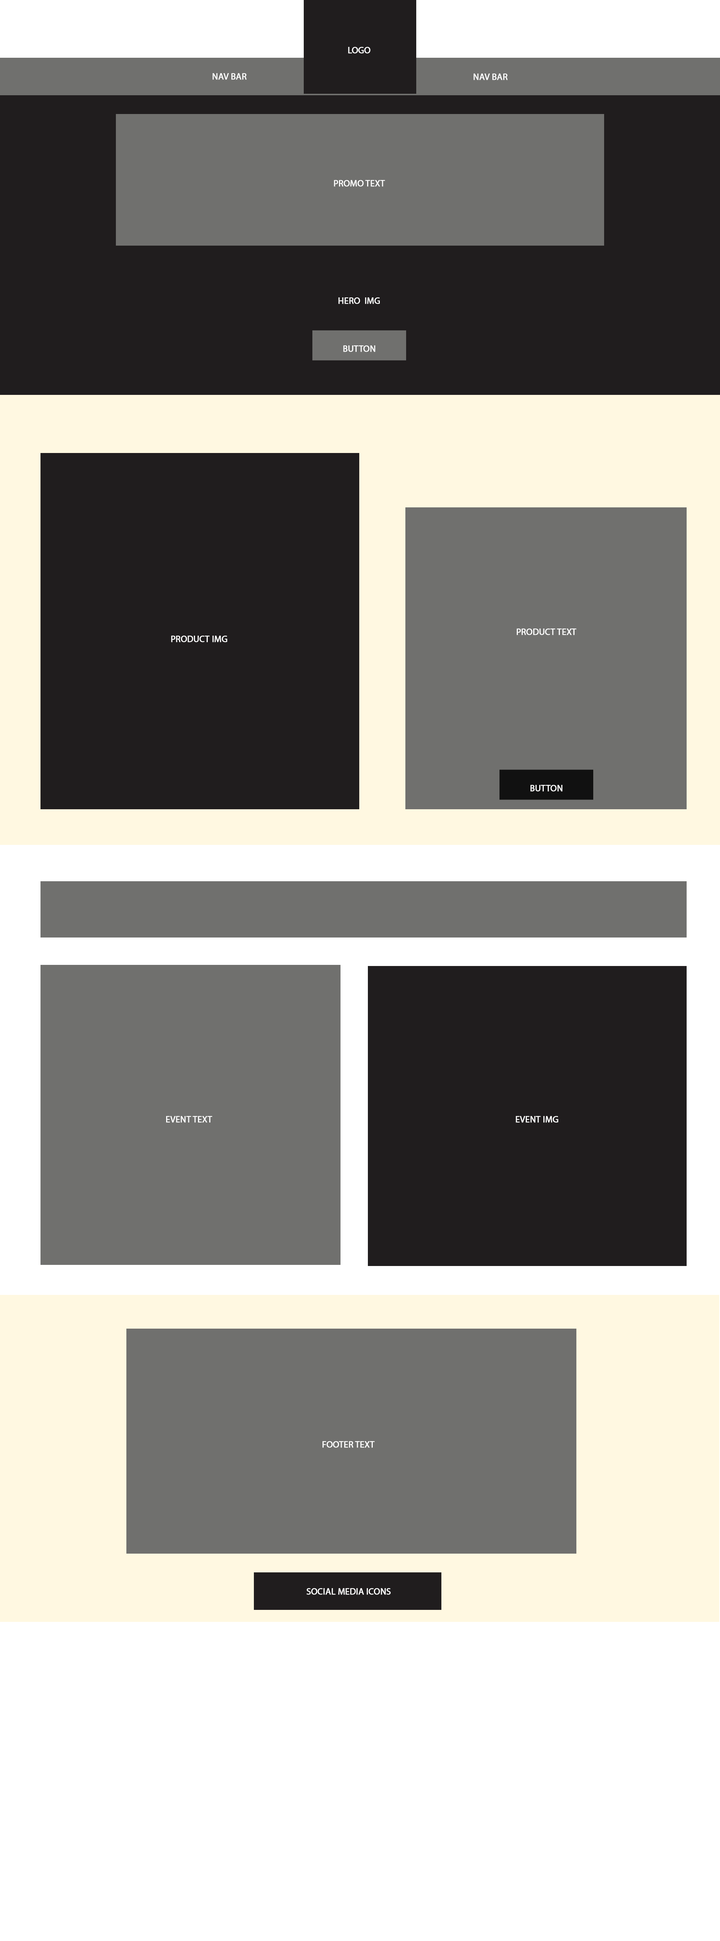
<style>
.page{position:relative;width:720px;height:1941px;background:#70706e}
.page>*{position:absolute;margin:0}
.t1{font:9px "MyriadPro-Regular";letter-spacing:-0.003em;color:#ffffff;font-weight:bold}
.t2{font:9px "MyriadPro-Regular";letter-spacing:-0.003em;color:#fefefe;font-weight:bold}
</style>
<div class="page">
<p class="t1" style="left:348px;top:47px;width:22px;height:7px">LOGO</p>
<p class="t2" style="left:213px;top:73px;width:34px;height:7px">NAV BAR</p>
<p class="t2" style="left:474px;top:74px;width:34px;height:6px">NAV BAR</p>
<p class="t2" style="left:334px;top:180px;width:51px;height:7px">PROMO TEXT</p>
<p class="t2" style="left:338px;top:297px;width:42px;height:7px">HERO  IMG</p>
<p class="t2" style="left:343px;top:345px;width:32px;height:7px">BUTTON</p>
<p class="t2" style="left:517px;top:628px;width:59px;height:7px">PRODUCT TEXT</p>
<p class="t2" style="left:171px;top:636px;width:56px;height:6px">PRODUCT IMG</p>
<p class="t2" style="left:530px;top:785px;width:32px;height:7px">BUTTON</p>
<p class="t2" style="left:166px;top:1116px;width:46px;height:7px">EVENT TEXT</p>
<p class="t2" style="left:516px;top:1116px;width:42px;height:7px">EVENT IMG</p>
<p class="t1" style="left:322px;top:1441px;width:53px;height:7px">FOOTER TEXT</p>
<p class="t1" style="left:306px;top:1588px;width:85px;height:7px">SOCIAL MEDIA ICONS</p>
</div>
